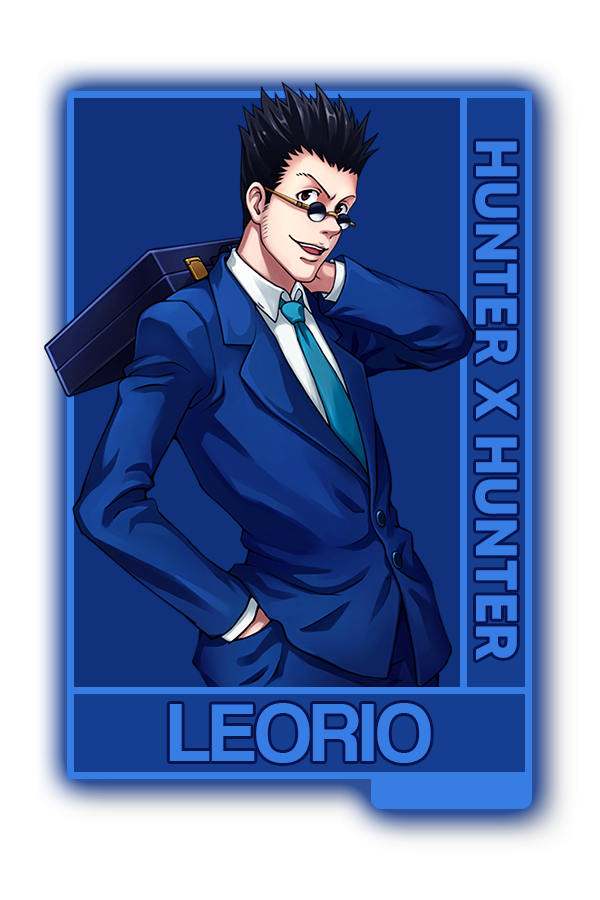
<style>
.page{position:relative;width:600px;height:900px;background:#ffffff}
.page>*{position:absolute;margin:0}
.t1{font:58.3px "MADETOMMY-Bold";color:#387de3}
.t2{font:84.2px "CoolveticaRg-Regular";color:#387de3}
</style>
<div class="page">
<p class="t1" style="left:475px;top:141px;width:42px;height:520px;rotate:90deg">HUNTER X HUNTER</p>
<p class="t2" style="left:169px;top:703px;width:262px;height:60px">LEORIO</p>
</div>
